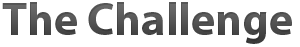
<style>
.page{position:relative;width:300px;height:47px;background:#ffffff}
.page>*{position:absolute;margin:0}
.t1{font:46px "MyriadPro-Bold";color:#464646}
</style>
<div class="page">
<p class="t1" style="left:2px;top:2px;width:290px;height:42px">The Challenge</p>
</div>
